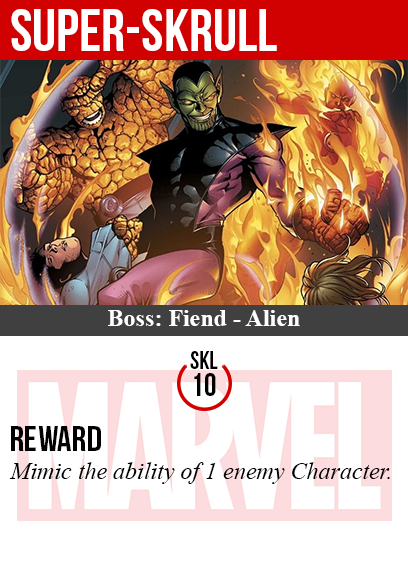
<style>
.page{position:relative;width:408px;height:585px;background:#ffffff}
.page>*{position:absolute;margin:0}
.t1{font:60px "BebasNeue";color:#ffffff}
.t2{font:24px "TimesNewRomanPS-BoldMT";color:#ffffff}
.t3{font:25px "BebasNeue";color:#000000}
.t4{font:32px "BebasNeue";color:#000000}
.t5{font:36px "BebasNeue";color:#000000}
.t6{font:24px "TimesNewRomanPS-ItalicMT";color:#000000}
</style>
<div class="page">
<p class="t1" style="left:11px;top:9px;width:266px;height:42px">super-skrull</p>
<p class="t2" style="left:108px;top:310px;width:192px;height:16px">Boss: Fiend - Alien</p>
<p class="t3" style="left:190px;top:351px;width:28px;height:18px">skl</p>
<p class="t4" style="left:194px;top:373px;width:22px;height:23px">10</p>
<p class="t5" style="left:11px;top:426px;width:90px;height:25px">reward</p>
<p class="t6" style="left:10px;top:462px;width:380px;height:22px">Mimic the ability of 1 enemy Character.</p>
</div>
